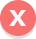
<style>
.page{position:relative;width:36px;height:39px;background:#f76f6f}
.page>*{position:absolute;margin:0}
.t1{font:32.9px "MyriadPro-Semibold";color:#f8f8f8;scale:1.06 1}
</style>
<div class="page">
<p class="t1" style="left:9px;top:10px;width:17px;height:16px">x</p>
</div>
